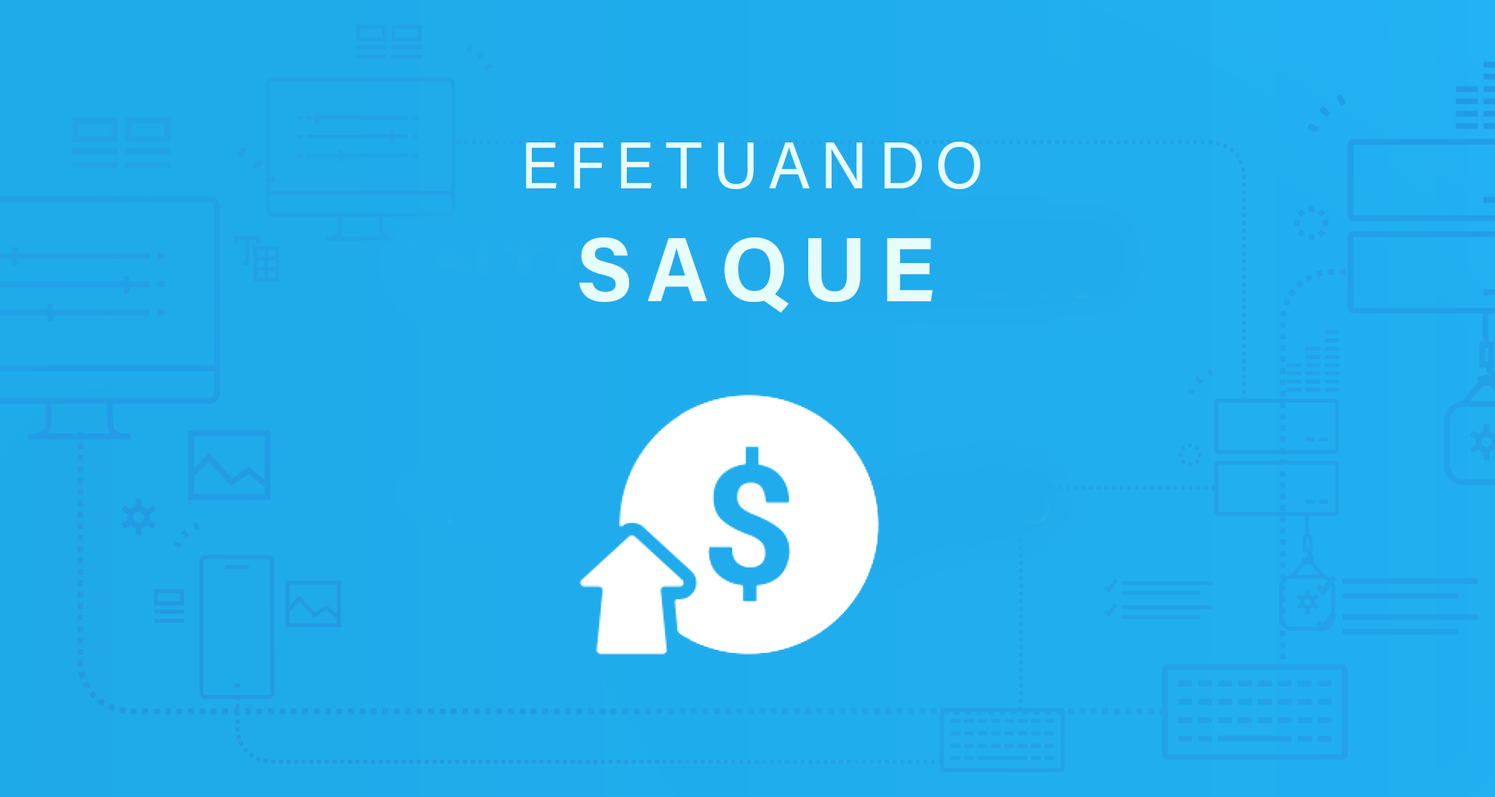
<style>
.page{position:relative;width:1495px;height:797px}
.page>*{position:absolute;margin:0}
.t1{font:66px "AcuminPro-Regular";letter-spacing:0.15em;color:#e7fdfb}
.t2{font:90.5px "AcuminPro-Bold";letter-spacing:0.15em;color:#e7fdfb}
</style>
<div class="page">
<p class="t1" style="left:526px;top:142px;width:454px;height:47px">EFETUANDO</p>
<p class="t2" style="left:579px;top:238px;width:354px;height:75px">SAQUE</p>
</div>
